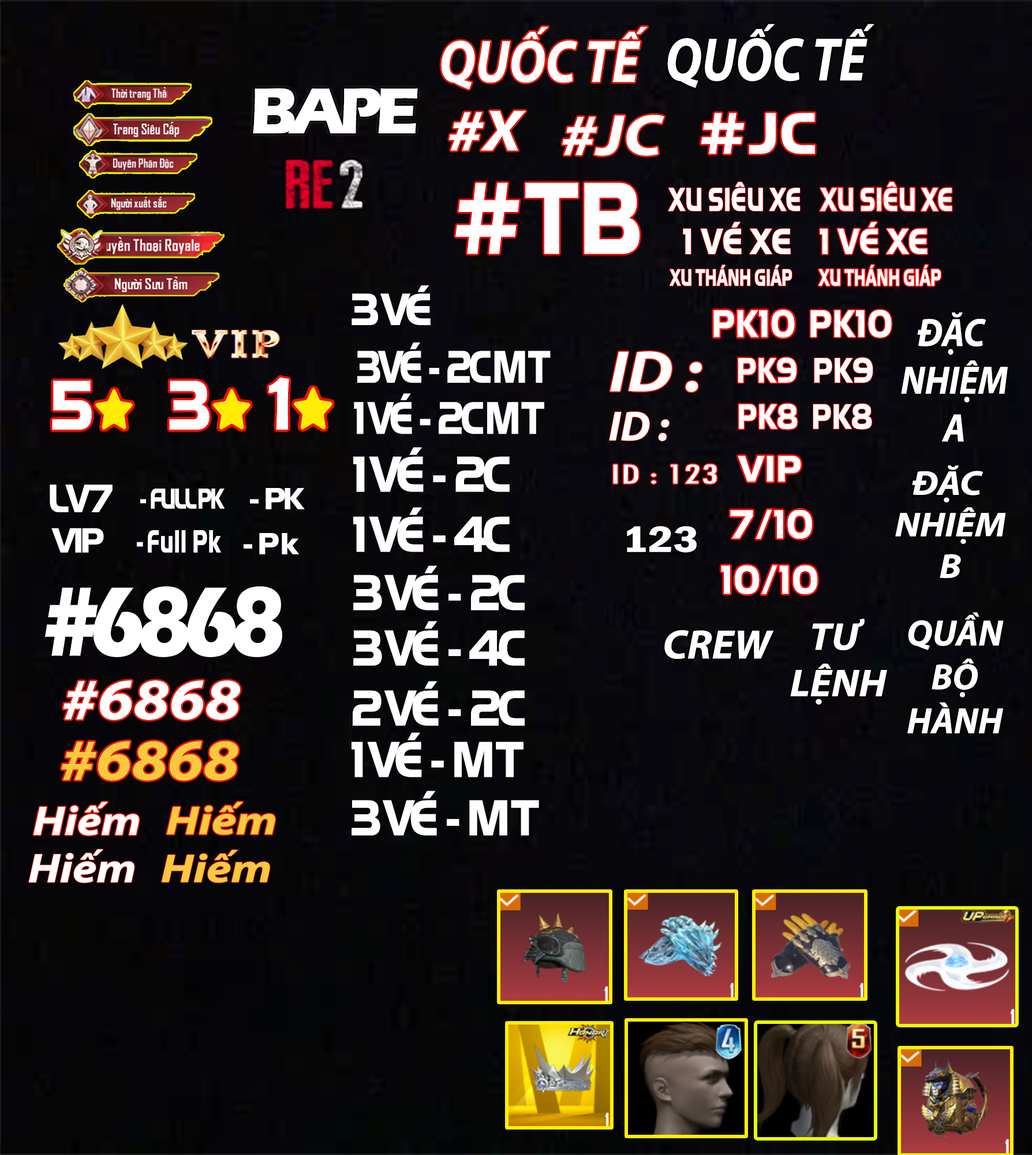
<style>
.page{position:relative;width:1032px;height:1155px}
.page>*{position:absolute;margin:0}
.t1{font:60px "MyriadPro-BoldIt";color:#ffffff;scale:0.86 1}
.t2{font:61.5px "MyriadPro-BoldIt";color:#ffffff;scale:0.84 1}
.t3{font:67.1px "ErasITC-Bold";letter-spacing:-0.1em;color:#ffffff}
.t4{font:58.3px "MyriadPro-BoldIt";color:#ffffff;scale:1.14 1}
.t5{font:61px "ITC-Handel-Gothic-Arabic-Heavy";color:#ffffff}
.t6{font:106.6px "ITC-Handel-Gothic-Arabic-Heavy";color:#ffffff;scale:0.85 1}
.t7{font:34.3px "ITC-Handel-Gothic-Arabic-Heavy";color:#ffffff;scale:0.71 1}
.t8{font:37.9px "ITC-Handel-Gothic-Arabic-Heavy";color:#ffffff;scale:0.85 1}
.t9{font:24.5px "ITC-Handel-Gothic-Arabic-Heavy";color:#ffffff;scale:0.65 1}
.t10{font:47.1px "ITC-Handel-Gothic-Arabic-Heavy";letter-spacing:-0.1em;color:#ffffff;scale:0.92 1}
.t11{font:40.3px "ITC-Handel-Gothic-Arabic-Heavy";color:#ffffff;scale:0.87 1}
.t12{font:39.7px "MyriadPro-BoldIt";color:#ffffff;scale:0.92 1}
.t13{font:47.8px "ITC-Handel-Gothic-Arabic-Heavy";letter-spacing:-0.1em;color:#ffffff;scale:0.79 1}
.t14{font:36.8px "ITC-Handel-Gothic-Arabic-Heavy";color:#ffffff;scale:0.81 1}
.t15{font:86.5px "BerlinSansFB-Reg";color:#ffffff;scale:1.08 1}
.t16{font:73.3px "ITC-Handel-Gothic-Arabic-Heavy";color:#ffffff;scale:0.89 1}
.t17{font:73.3px "ITC-Handel-Gothic-Arabic-Heavy";color:#ffffff;scale:0.9 1}
.t18{font:47.8px "ITC-Handel-Gothic-Arabic-Heavy";letter-spacing:-0.1em;color:#ffffff;scale:0.81 1}
.t19{font:41.9px "MyriadPro-BoldIt";color:#ffffff;scale:1.03 1}
.t20{font:52.5px "ITC-Handel-Gothic-Arabic-Heavy";letter-spacing:-0.1em;color:#ffffff;scale:0.89 1}
.t21{font:38.5px "ITC-Handel-Gothic-Arabic-Heavy";color:#ffffff}
.t22{font:30.1px "TwCenMT-Condensed";color:#ffffff;scale:1.57 1}
.t23{font:34.6px "MyriadPro-BoldIt";color:#ffffff;scale:1.09 1}
.t24{font:41.5px "ITC-Handel-Gothic-Arabic-Heavy";letter-spacing:-0.1em;color:#ffffff;scale:0.91 1}
.t25{font:30.1px "ITC-Handel-Gothic-Arabic-Heavy";letter-spacing:-0.1em;color:#ffffff;scale:0.73 1}
.t26{font:31.8px "ITC-Handel-Gothic-Arabic-Heavy";letter-spacing:-0.1em;color:#ffffff}
.t27{font:42px "ITC-Handel-Gothic-Arabic-Heavy";color:#ffffff;scale:0.89 1}
.t28{font:36.3px "ITC-Handel-Gothic-Arabic-Heavy";letter-spacing:-0.1em;color:#ffffff}
.t29{font:33.5px "ITC-Handel-Gothic-Arabic-Heavy";letter-spacing:-0.1em;color:#ffffff;scale:0.68 1}
.t30{font:37.8px "FranklinGothic-DemiCond";color:#ffffff;scale:1.32 1}
.t31{font:101.9px "ErasITC-Bold";letter-spacing:-0.1em;color:#ffffff;scale:0.83 1}
.t32{font:36.5px "MyriadPro-BoldIt";color:#ffffff}
.t33{font:38.6px "MyriadPro-BoldIt";color:#ffffff;scale:1.07 1}
.t34{font:41.2px "MyriadPro-BoldIt";color:#ffffff}
.t35{font:58.3px "MyriadPro-BoldIt";color:#f6c940;scale:1.14 1}
.t36{font:41.2px "MyriadPro-BoldIt";color:#ffffff;scale:1.16 1}
.t37{font:40.4px "MyriadPro-BoldIt";color:#f6c940;scale:1.22 1}
</style>
<div class="page">
<p class="t1" style="left:441px;top:27px;width:207px;height:63px">QUỐC TẾ</p>
<p class="t2" style="left:668px;top:24px;width:207px;height:64px">QUỐC TẾ</p>
<p class="t3" style="left:253px;top:88px;width:165px;height:45px">BAPE</p>
<p class="t4" style="left:449px;top:111px;width:77px;height:40px">#X</p>
<p class="t5" style="left:701px;top:113px;width:114px;height:41px">#JC</p>
<p class="t4" style="left:562px;top:115px;width:103px;height:41px">#JC</p>
<p class="t6" style="left:456px;top:182px;width:184px;height:72px">#TB</p>
<p class="t7" style="left:668px;top:182px;width:132px;height:29px">XU SIÊU XE</p>
<p class="t7" style="left:820px;top:182px;width:132px;height:29px">XU SIÊU XE</p>
<p class="t8" style="left:683px;top:222px;width:108px;height:32px">1 VÉ XE</p>
<p class="t8" style="left:820px;top:222px;width:108px;height:32px">1 VÉ XE</p>
<p class="t9" style="left:670px;top:264px;width:122px;height:22px">XU THÁNH GIÁP</p>
<p class="t9" style="left:819px;top:264px;width:122px;height:22px">XU THÁNH GIÁP</p>
<p class="t10" style="left:352px;top:285px;width:79px;height:40px">3 VÉ</p>
<p class="t11" style="left:714px;top:310px;width:81px;height:28px">PK10</p>
<p class="t11" style="left:811px;top:310px;width:81px;height:28px">PK10</p>
<p class="t12" style="left:901px;top:312px;width:107px;height:130px;text-align:center">ĐẶC<br> NHIỆM<br> A</p>
<p class="t13" style="left:357px;top:342px;width:194px;height:41px">3VÉ  -  2C M T</p>
<p class="t4" style="left:610px;top:351px;width:92px;height:41px">ID :</p>
<p class="t14" style="left:739px;top:357px;width:58px;height:26px">PK9</p>
<p class="t14" style="left:815px;top:357px;width:58px;height:26px">PK9</p>
<p class="t15" style="left:269px;top:377px;width:20px;height:53px">1</p>
<p class="t16" style="left:52px;top:381px;width:40px;height:49px">5</p>
<p class="t17" style="left:169px;top:381px;width:41px;height:49px">3</p>
<p class="t18" style="left:354px;top:393px;width:191px;height:41px">1 VÉ  -  2C M T</p>
<p class="t19" style="left:609px;top:412px;width:61px;height:29px">ID :</p>
<p class="t14" style="left:739px;top:404px;width:59px;height:26px">PK8</p>
<p class="t14" style="left:814px;top:404px;width:59px;height:26px">PK8</p>
<p class="t20" style="left:353px;top:447px;width:157px;height:45px">1 VÉ  -  2C</p>
<p class="t21" style="left:738px;top:456px;width:64px;height:26px">VIP</p>
<p class="t22" style="left:613px;top:464px;width:104px;height:20px">ID : 123</p>
<p class="t23" style="left:896px;top:465px;width:111px;height:113px;text-align:center">ĐẶC<br> NHIỆM<br> B</p>
<p class="t24" style="left:50px;top:484px;width:63px;height:28px">LV7</p>
<p class="t25" style="left:140px;top:489px;width:85px;height:20px">-  FULL PK</p>
<p class="t26" style="left:250px;top:488px;width:55px;height:21px">-  PK</p>
<p class="t20" style="left:353px;top:507px;width:157px;height:45px">1 VÉ  -  4C</p>
<p class="t27" style="left:730px;top:509px;width:82px;height:30px">7/10</p>
<p class="t28" style="left:51px;top:528px;width:53px;height:25px">VIP</p>
<p class="t29" style="left:137px;top:530px;width:84px;height:23px">-  F u l l   P k</p>
<p class="t26" style="left:244px;top:533px;width:55px;height:21px">-  P k</p>
<p class="t30" style="left:627px;top:526px;width:70px;height:27px">123</p>
<p class="t20" style="left:353px;top:565px;width:172px;height:45px">3 VÉ  -  2C</p>
<p class="t27" style="left:721px;top:565px;width:97px;height:29px">10/10</p>
<p class="t31" style="left:45px;top:586px;width:237px;height:71px">#6868</p>
<p class="t32" style="left:908px;top:612px;width:96px;height:121px;text-align:center">QUẦN<br>BỘ<br>HÀNH</p>
<p class="t20" style="left:353px;top:621px;width:172px;height:45px">3 VÉ  -  4C</p>
<p class="t33" style="left:791px;top:618px;width:97px;height:86px;text-align:center">TƯ<br> LỆNH</p>
<p class="t34" style="left:665px;top:630px;width:109px;height:29px">CREW</p>
<p class="t4" style="left:63px;top:680px;width:177px;height:40px">#6868</p>
<p class="t20" style="left:353px;top:681px;width:172px;height:45px">2 VÉ  -  2C</p>
<p class="t20" style="left:352px;top:732px;width:172px;height:45px">1 VÉ  -  M T</p>
<p class="t35" style="left:61px;top:741px;width:177px;height:40px">#6868</p>
<p class="t20" style="left:352px;top:791px;width:187px;height:45px">3 VÉ  -  M T</p>
<p class="t36" style="left:33px;top:802px;width:106px;height:34px">Hiếm</p>
<p class="t37" style="left:167px;top:802px;width:108px;height:33px">Hiếm</p>
<p class="t36" style="left:29px;top:849px;width:106px;height:34px">Hiếm</p>
<p class="t37" style="left:162px;top:849px;width:108px;height:34px">Hiếm</p>
</div>
